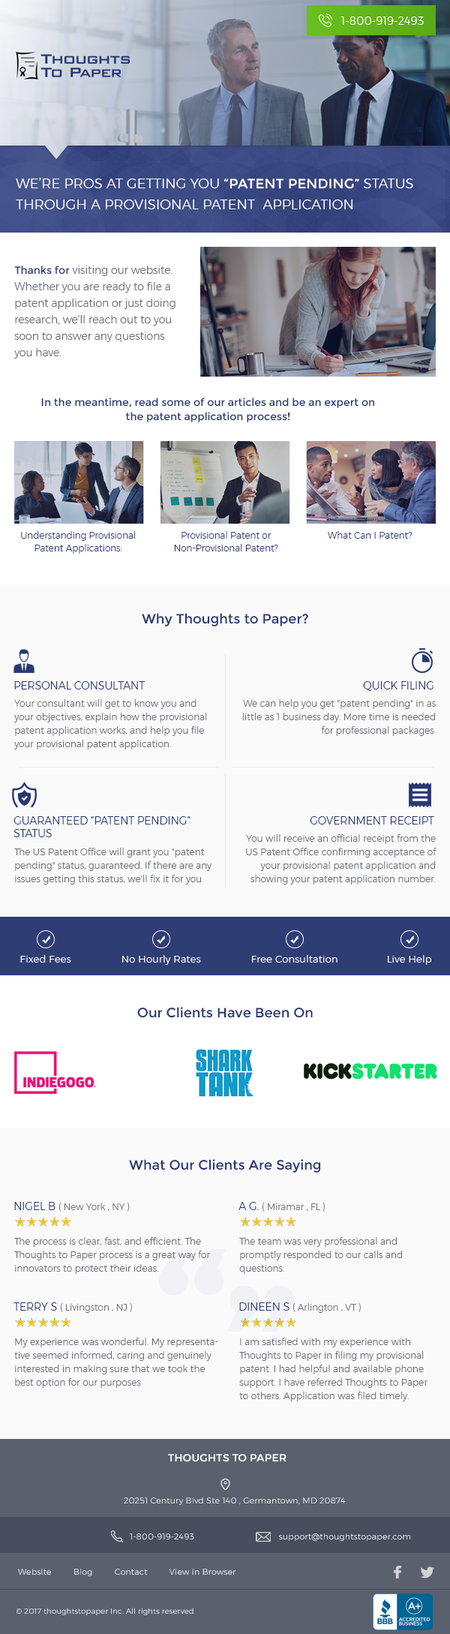
<style>
.page{position:relative;width:450px;height:1634px;background:#fafafb}
.page>*{position:absolute;margin:0}
.t1{font:10.5px "Montserrat-Light";letter-spacing:0.02em;color:#ffffff}
.t2{font:13.5px/21px "Montserrat-Light";letter-spacing:0.01em;color:#ffffff;text-transform:uppercase}
.t3{font:13.5px/21px "Montserrat-Regular";letter-spacing:0.01em;color:#ffffff;text-transform:uppercase}
.t4{font:10.5px/16.5px "Montserrat-Light";color:#686b77}
.t5{font:10.5px/16.5px "Montserrat-Regular";color:#283771}
.t6{font:10.5px/14.2px "Montserrat-Regular";color:#283771}
.t7{font:9px/12.8px "Montserrat-Light";color:#283771}
.t8{font:9px "Montserrat-Light";color:#283771}
.t9{font:13.5px "Montserrat-Regular";color:#283771}
.t10{font:10.5px "Montserrat-Light";color:#283771;text-transform:uppercase}
.t11{font:10.5px "Montserrat-Light";color:#283771}
.t12{font:9px/13.5px "Montserrat-Light";letter-spacing:0.01em;color:#686b77}
.t13{font:10.5px/12.8px "Montserrat-Light";color:#283771;text-transform:uppercase}
.t14{font:9.8px "Montserrat-Light";letter-spacing:0.02em;color:#ffffff}
.t15{font:9px "Montserrat-Light";color:#737373}
.t16{font:10.5px "Montserrat-Medium";letter-spacing:0.02em;color:#ffffff;text-transform:uppercase}
.t17{font:8.2px "Montserrat-Light";letter-spacing:0.02em;color:#ffffff}
.t18{font:7.5px "Montserrat-Light";letter-spacing:0.02em;color:#ffffff}
</style>
<div class="page">
<p class="t1" style="left:340px;top:16px;width:84px;height:9px">1-800-919-2493</p>
<p class="t2" style="left:16px;top:178px;width:397px;height:31px">We’re pros at getting you<span class="t3"> “Patent Pending” </span>status through a provisional patent  application</p>
<p class="t4" style="left:14px;top:266px;width:162px;height:92px"><span class="t5">Thanks for </span>visiting our website. Whether you are ready to file a patent application or just doing research, we’ll reach out to you soon to answer any questions you have.</p>
<p class="t6" style="left:41px;top:398px;width:334px;height:24px;text-align:center">In the meantime, read some of our articles and be an expert on the patent application process!</p>
<p class="t7" style="left:21px;top:531px;width:114px;height:23px;text-align:center">Understanding Provisional Patent Applications:</p>
<p class="t7" style="left:174px;top:531px;width:104px;height:20px;text-align:center">Provisional Patent or Non-Provisional Patent?</p>
<p class="t8" style="left:328px;top:531px;width:84px;height:7px">What Can I Patent?</p>
<p class="t9" style="left:142px;top:613px;width:166px;height:13px">Why Thoughts to Paper?</p>
<p class="t10" style="left:14px;top:681px;width:131px;height:8px">Personal Consultant</p>
<p class="t11" style="left:363px;top:681px;width:71px;height:10px">QUICK FILING</p>
<p class="t12" style="left:14px;top:699px;width:193px;height:50px">Your consultant will get to know you and your objectives, explain how the provisional patent application works, and help you file your provisional patent application.</p>
<p class="t12" style="left:242px;top:699px;width:194px;height:37px;text-align:right">We can help you get "patent pending" in as little as 1 business day. More time is needed for professional packages.</p>
<p class="t13" style="left:14px;top:816px;width:176px;height:21px">GUARANTEED "PATENT PENDING" STATUS</p>
<p class="t11" style="left:310px;top:816px;width:124px;height:8px">GOVERNMENT RECEIPT</p>
<p class="t12" style="left:246px;top:834px;width:190px;height:50px;text-align:right">You will receive an official receipt from the US Patent Office confirming acceptance of your provisional patent application and showing your patent application number.</p>
<p class="t12" style="left:14px;top:848px;width:198px;height:36px">The US Patent Office will grant you "patent pending" status, guaranteed. If there are any issues getting this status, we'll fix it for you</p>
<p class="t14" style="left:20px;top:955px;width:51px;height:7px">Fixed Fees</p>
<p class="t14" style="left:122px;top:955px;width:79px;height:9px">No Hourly Rates</p>
<p class="t14" style="left:252px;top:955px;width:86px;height:7px">Free Consultation</p>
<p class="t14" style="left:388px;top:955px;width:44px;height:9px">Live Help</p>
<p class="t9" style="left:137px;top:1006px;width:176px;height:12px">Our Clients Have Been On</p>
<p class="t9" style="left:129px;top:1159px;width:192px;height:13px">What Our Clients Are Saying</p>
<p class="t15" style="left:14px;top:1202px;width:116px;height:9px"><span class="t10">Nigel B </span>( New York , NY )</p>
<p class="t15" style="left:238px;top:1202px;width:87px;height:9px"><span class="t10">A G. </span>( Miramar , FL )</p>
<p class="t12" style="left:14px;top:1237px;width:196px;height:37px">The process is clear, fast, and efficient. The Thoughts to Paper process is a great way for innovators to protect their ideas.</p>
<p class="t12" style="left:239px;top:1237px;width:163px;height:37px">The team was very professional and promptly responded to our calls and <br>questions.</p>
<p class="t15" style="left:14px;top:1302px;width:118px;height:10px"><span class="t10">Terry S </span>( Livingston , NJ )</p>
<p class="t15" style="left:239px;top:1302px;width:122px;height:10px"><span class="t10">Dineen S </span>( Arlington , VT )</p>
<p class="t12" style="left:14px;top:1337px;width:204px;height:51px">My experience was wonderful. My representative seemed informed, caring and genuinely interested in making sure that we took the best option for our purposes</p>
<p class="t12" style="left:239px;top:1337px;width:189px;height:64px">I am satisfied with my experience with Thoughts to Paper in filing my provisional patent. I had helpful and available phone support. I have referred Thoughts to Paper to others. Application was filed timely.</p>
<p class="t16" style="left:168px;top:1454px;width:118px;height:8px">Thoughts to Paper</p>
<p class="t17" style="left:124px;top:1497px;width:222px;height:7px">20251 Century Blvd Ste 140 , Germantown, MD 20874</p>
<p class="t17" style="left:130px;top:1533px;width:64px;height:6px">1-800-919-2493</p>
<p class="t17" style="left:279px;top:1533px;width:131px;height:7px">support@thoughtstopaper.com</p>
<p class="t17" style="left:18px;top:1568px;width:218px;height:8px">Website         Blog         Contact         View in Browser</p>
<p class="t18" style="left:16px;top:1607px;width:178px;height:8px">© 2017 thoughtstopaper Inc. All rights reserved</p>
</div>
